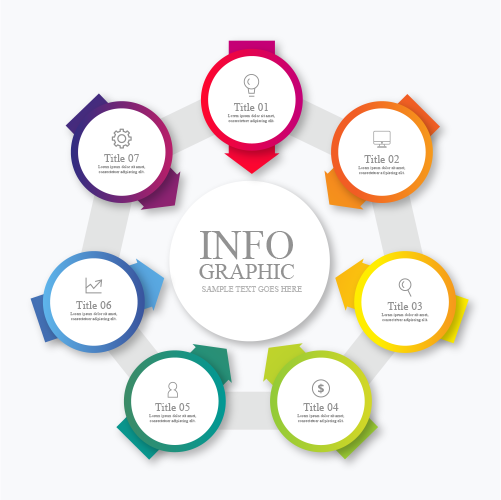
<style>
.page{position:relative;width:501px;height:500px;background:#f8f9fb}
.page>*{position:absolute;margin:0}
.t1{font:11.4px "OpenSans-Bold";color:#919191}
.t2{font:4.1px "OpenSans";color:#919191}
.t3{font:21.9px/19.4px "OpenSans-Bold";color:#919191}
.t4{font:40.9px/19.4px "OpenSans-Bold";color:#919191}
.t5{font:8.1px "OpenSans-Regular";color:#b6b6b6}
</style>
<div class="page">
<p class="t1" style="left:233px;top:103px;width:35px;height:8px">Title 01</p>
<p class="t2" style="left:227px;top:114px;width:48px;height:9px;text-align:center">Lorem ipsum dolor sit amet, consectetuer adipiscing elit.</p>
<p class="t1" style="left:104px;top:154px;width:35px;height:8px">Title 07</p>
<p class="t1" style="left:364px;top:155px;width:35px;height:8px">Title 02</p>
<p class="t2" style="left:98px;top:165px;width:48px;height:9px;text-align:center">Lorem ipsum dolor sit amet, consectetuer adipiscing elit.</p>
<p class="t2" style="left:358px;top:166px;width:48px;height:9px;text-align:center">Lorem ipsum dolor sit amet, consectetuer adipiscing elit.</p>
<p class="t3" style="left:199px;top:231px;width:95px;height:48px"><span class="t4">INFO<br></span>GRAPHIC</p>
<p class="t5" style="left:202px;top:286px;width:100px;height:6px">SAMPLE TEXT GOES HERE</p>
<p class="t1" style="left:76px;top:301px;width:36px;height:8px">Title 06</p>
<p class="t1" style="left:387px;top:302px;width:35px;height:8px">Title 03</p>
<p class="t2" style="left:70px;top:312px;width:48px;height:9px;text-align:center">Lorem ipsum dolor sit amet, consectetuer adipiscing elit.</p>
<p class="t2" style="left:381px;top:313px;width:48px;height:9px;text-align:center">Lorem ipsum dolor sit amet, consectetuer adipiscing elit.</p>
<p class="t2" style="left:149px;top:414px;width:48px;height:9px;text-align:center">Lorem ipsum dolor sit amet, consectetuer adipiscing elit.</p>
<p class="t1" style="left:155px;top:403px;width:35px;height:8px">Title 05</p>
<p class="t2" style="left:297px;top:414px;width:48px;height:9px;text-align:center">Lorem ipsum dolor sit amet, consectetuer adipiscing elit.</p>
<p class="t1" style="left:303px;top:403px;width:36px;height:8px">Title 04</p>
</div>
